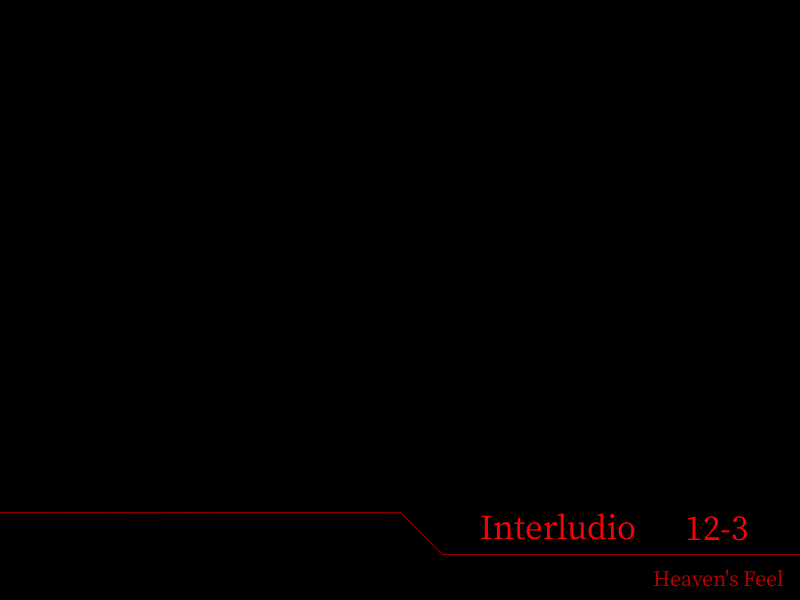
<style>
.page{position:relative;width:800px;height:600px;background:#000000}
.page>*{position:absolute;margin:0}
.t1{font:38px "OfficialFateFont-Medium";color:#ff0000}
.t2{font:24px "OfficialFateFont-Medium";color:#b20000}
</style>
<div class="page">
<p class="t1" style="left:481px;top:513px;width:154px;height:27px">Interludio</p>
<p class="t1" style="left:687px;top:516px;width:60px;height:25px">12-3</p>
<p class="t2" style="left:653px;top:569px;width:130px;height:18px">Heaven's Feel</p>
</div>
